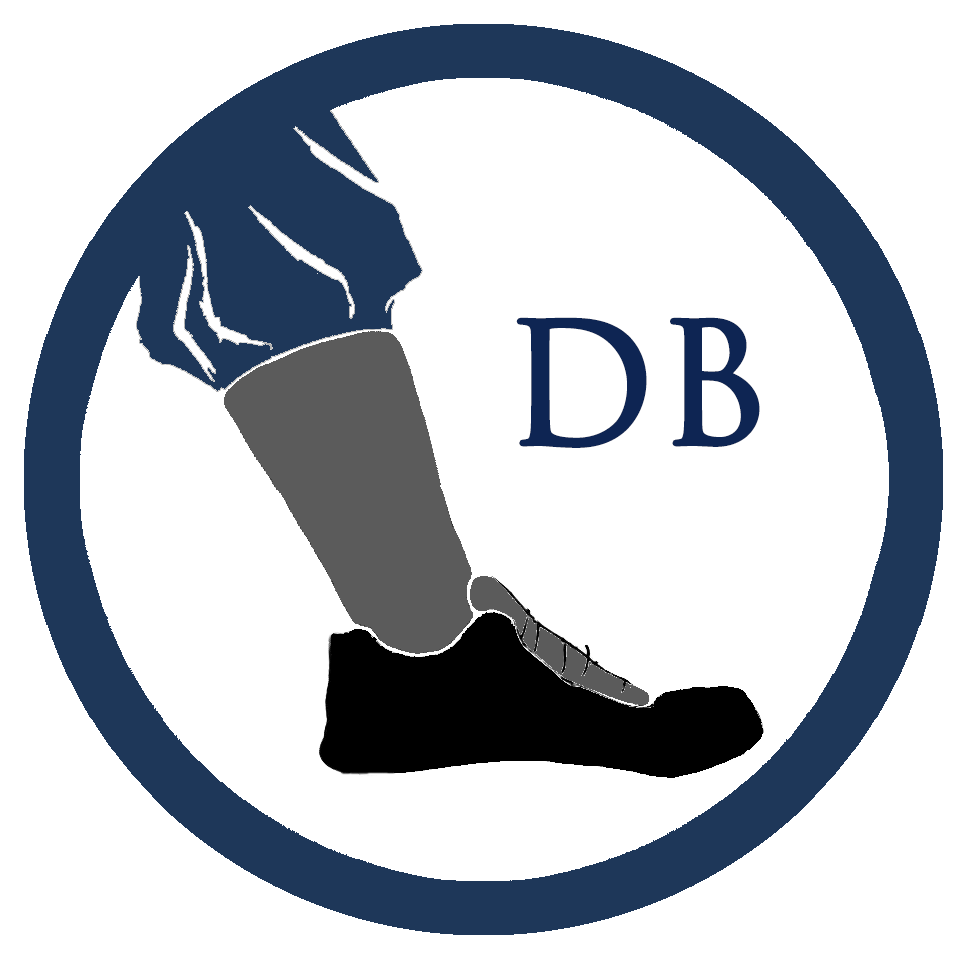
<style>
.page{position:relative;width:973px;height:965px;background:#ffffff}
.page>*{position:absolute;margin:0}
.t1{font:164px "TrajanPro-Regular";color:#0d224f;font-weight:bold}
</style>
<div class="page">
<p class="t1" style="left:516px;top:317px;width:244px;height:131px">DB</p>
</div>
